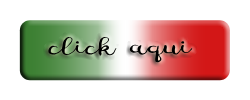
<style>
.page{position:relative;width:250px;height:100px;background:#ffffff}
.page>*{position:absolute;margin:0}
.t1{font:12.1px "Digory_Doodles_PS";color:#000000;scale:1.5 1}
</style>
<div class="page">
<p class="t1" style="left:48px;top:37px;width:145px;height:26px">click aqui</p>
</div>
